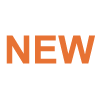
<style>
.page{position:relative;width:100px;height:100px;background:#ffffff}
.page>*{position:absolute;margin:0}
.t1{font:39px "Arial-BoldMT";color:#e77233}
</style>
<div class="page">
<p class="t1" style="left:6px;top:35px;width:89px;height:29px">NEW</p>
</div>
